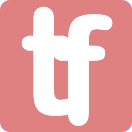
<style>
.page{position:relative;width:132px;height:132px;background:#df8181}
.page>*{position:absolute;margin:0}
.t1{font:150px "ArialRoundedMTBold";color:#ffffff}
</style>
<div class="page">
<p class="t1" style="left:21px;top:6px;width:56px;height:110px">t</p>
<p class="t1" style="left:53px;top:14px;width:60px;height:112px">f</p>
</div>
